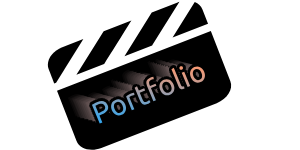
<style>
.page{position:relative;width:300px;height:150px;background:#ffffff}
.page>*{position:absolute;margin:0}
.t1{font:29.7px "Ubuntu-Regular"}
</style>
<div class="page">
<p class="t1" style="left:91px;top:66px;width:114px;height:58px;rotate:-23deg">Portfolio</p>
</div>
